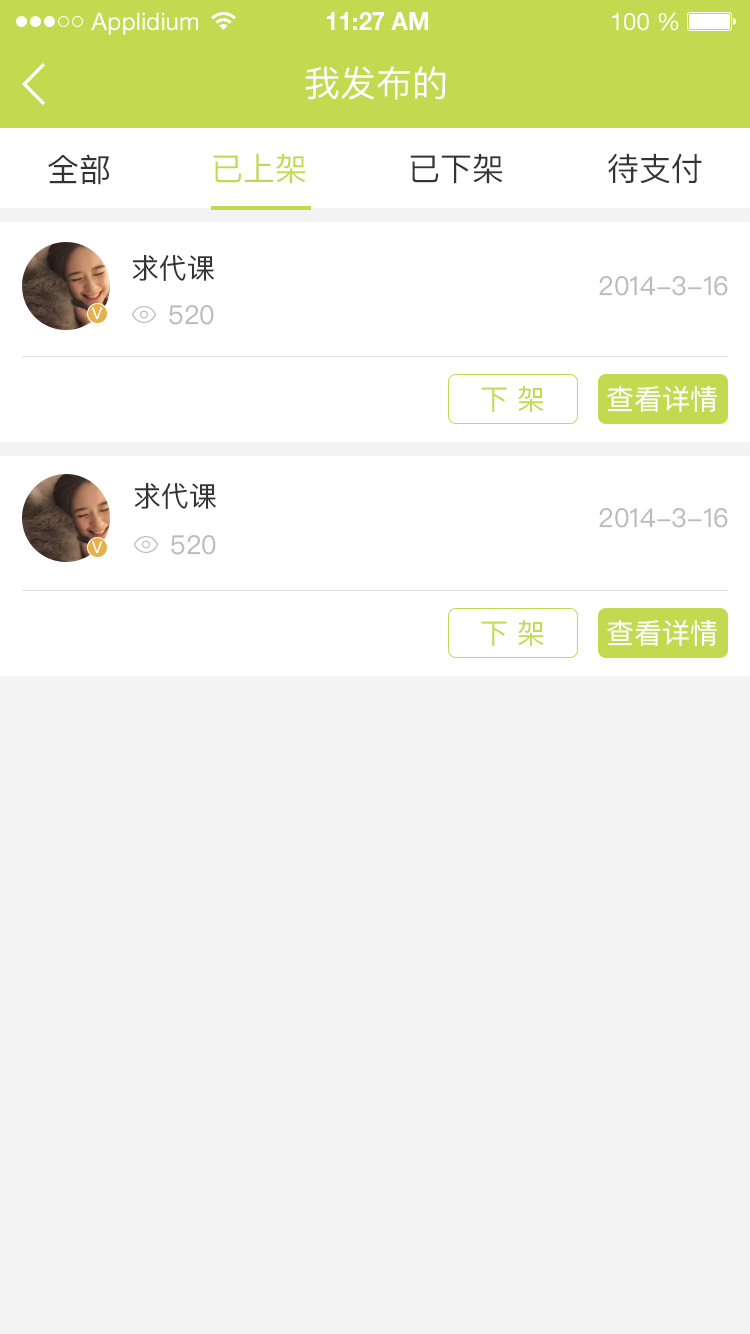
<style>
.page{position:relative;width:750px;height:1334px;background:#f3f3f3}
.page>*{position:absolute;margin:0}
.t1{font:24px "HelveticaNeueLTStd-Roman";color:#ffffff}
.t2{font:24px "HelveticaNeueLTStd-Bd";color:#ffffff}
.t3{font:36px "PingFangSC-Regular";color:#ffffff}
.t4{font:32px "PingFangSC-Regular";color:#333333}
.t5{font:32px "PingFangSC-Regular";color:#c3d94f}
.t6{font:28px "PingFangSC-Regular";color:#333333}
.t7{font:26px "PingFangSC-Regular";color:#bbbbbb}
.t8{font:15.9px "PingFangSC-Regular";color:#ffffff}
.t9{font:28px "PingFangSC-Regular";color:#c3d94f}
.t10{font:28px "PingFangSC-Regular";color:#ffffff}
</style>
<div class="page">
<p class="t1" style="left:91px;top:12px;width:107px;height:23px">Applidium</p>
<p class="t2" style="left:326px;top:12px;width:102px;height:18px">11:27 AM</p>
<p class="t1" style="left:612px;top:12px;width:67px;height:19px">100 %</p>
<p class="t3" style="left:305px;top:66px;width:141px;height:34px">我发布的</p>
<p class="t4" style="left:48px;top:154px;width:61px;height:31px">全部</p>
<p class="t5" style="left:213px;top:153px;width:93px;height:31px">已上架</p>
<p class="t4" style="left:410px;top:154px;width:93px;height:30px">已下架</p>
<p class="t4" style="left:608px;top:153px;width:94px;height:31px">待支付</p>
<p class="t6" style="left:132px;top:254px;width:82px;height:27px">求代课</p>
<p class="t7" style="left:599px;top:276px;width:129px;height:20px">2014-3-16</p>
<p class="t7" style="left:169px;top:305px;width:45px;height:20px">520</p>
<p class="t8" style="left:92px;top:307px;width:11px;height:13px">V</p>
<p class="t9" style="left:481px;top:386px;width:63px;height:26px">下 架</p>
<p class="t10" style="left:607px;top:386px;width:110px;height:26px">查看详情</p>
<p class="t6" style="left:134px;top:482px;width:82px;height:27px">求代课</p>
<p class="t7" style="left:599px;top:508px;width:129px;height:20px">2014-3-16</p>
<p class="t7" style="left:171px;top:535px;width:45px;height:20px">520</p>
<p class="t9" style="left:481px;top:620px;width:63px;height:26px">下 架</p>
<p class="t10" style="left:607px;top:620px;width:110px;height:26px">查看详情</p>
</div>
